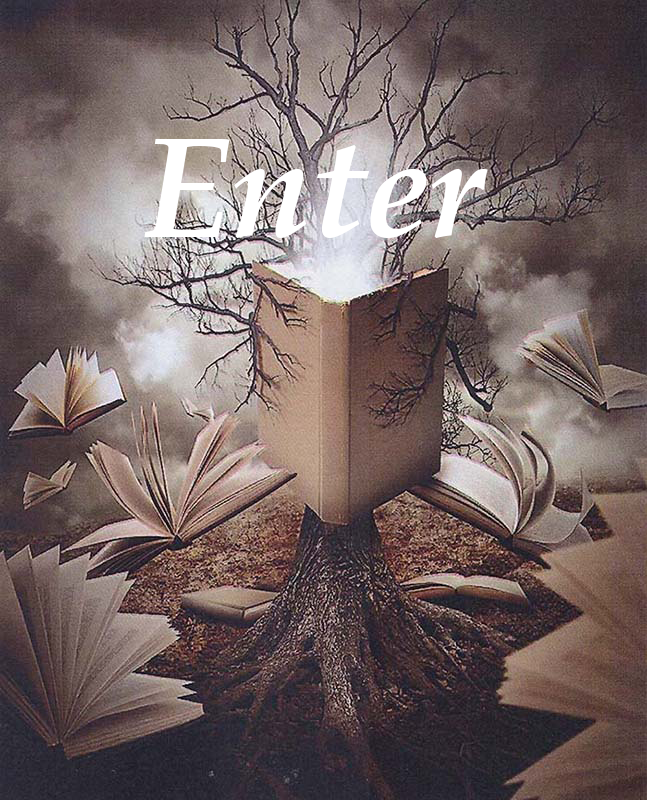
<style>
.page{position:relative;width:647px;height:800px}
.page>*{position:absolute;margin:0}
.t1{font:141.7px "BookAntiqua-BoldItalic";color:#ffffff}
</style>
<div class="page">
<p class="t1" style="left:144px;top:139px;width:344px;height:99px">Enter</p>
</div>
